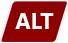
<style>
.page{position:relative;width:68px;height:43px;background:#8e0000}
.page>*{position:absolute;margin:0}
.t1{font:22px "SegoeUI-Bold";color:#ffffff}
</style>
<div class="page">
<p class="t1" style="left:15px;top:13px;width:39px;height:16px">ALT</p>
</div>
